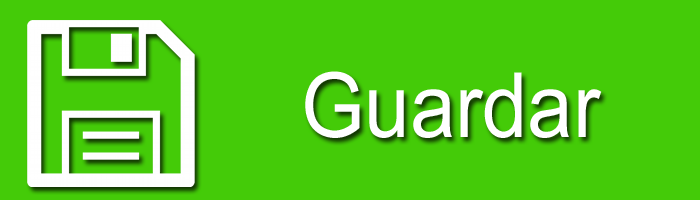
<style>
.page{position:relative;width:700px;height:200px;background:#44cb08}
.page>*{position:absolute;margin:0}
.t1{font:90px "ArialMT";color:#ffffff;scale:0.9 1}
</style>
<div class="page">
<p class="t1" style="left:305px;top:71px;width:297px;height:67px">Guardar</p>
</div>
